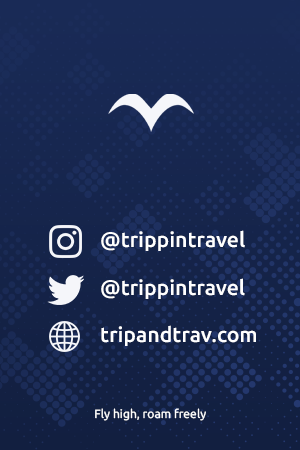
<style>
.page{position:relative;width:300px;height:450px}
.page>*{position:absolute;margin:0}
.t1{font:21px "Ubuntu-Medium";color:#ffffff}
.t2{font:12px "Ubuntu-Regular";color:#ffffff}
</style>
<div class="page">
<p class="t1" style="left:101px;top:230px;width:144px;height:21px">@trippintravel</p>
<p class="t1" style="left:101px;top:278px;width:144px;height:21px">@trippintravel</p>
<p class="t1" style="left:101px;top:325px;width:155px;height:21px">tripandtrav.com</p>
<p class="t2" style="left:95px;top:408px;width:111px;height:13px">Fly high, roam freely</p>
</div>
